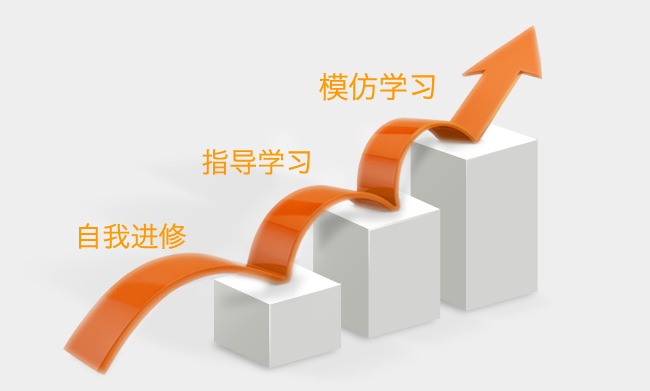
<style>
.page{position:relative;width:650px;height:391px;background:#eeeeee}
.page>*{position:absolute;margin:0}
.t1{font:29.9px "HiraginoSansGB-W3";color:#ff9900}
.t2{font:28px "HiraginoSansGB-W3";color:#ff9900}
</style>
<div class="page">
<p class="t1" style="left:319px;top:72px;width:116px;height:29px">模仿学习</p>
<p class="t2" style="left:202px;top:149px;width:108px;height:26px">指导学习</p>
<p class="t2" style="left:79px;top:223px;width:107px;height:26px">自我进修</p>
</div>
